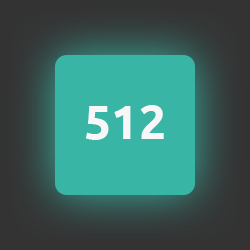
<style>
.page{position:relative;width:250px;height:250px;background:#39b5a5}
.page>*{position:absolute;margin:0}
.t1{font:48px "Ubuntu-Bold";color:#f7f7f7}
</style>
<div class="page">
<p class="t1" style="left:85px;top:105px;width:79px;height:35px">512</p>
</div>
